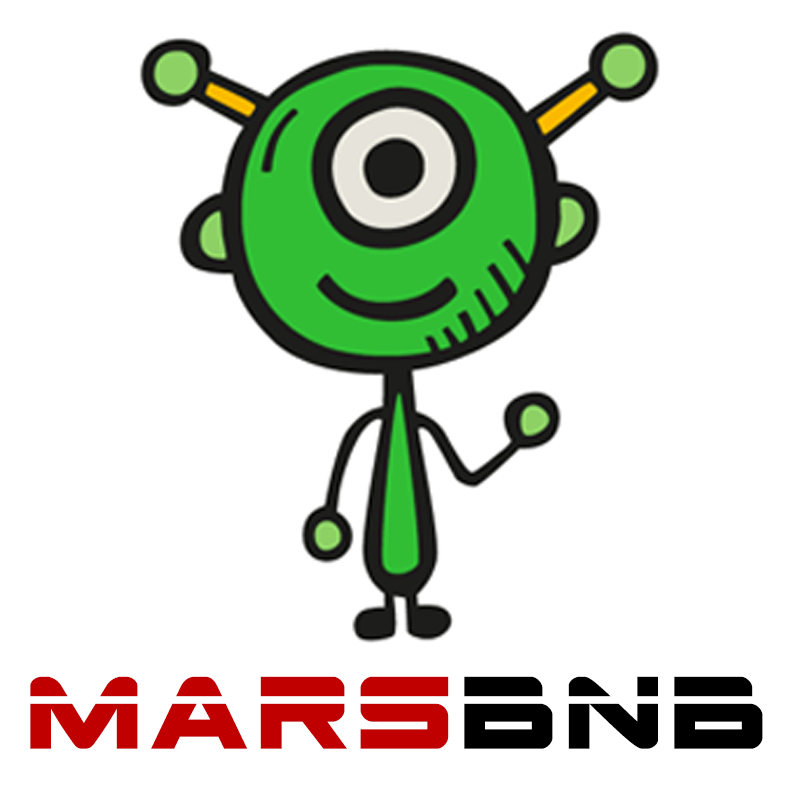
<style>
.page{position:relative;width:800px;height:800px;background:#ffffff}
.page>*{position:absolute;margin:0}
.t1{font:143.1px "SpaceRangerLaser";letter-spacing:0.05em;color:#c00000}
.t2{font:143.1px "SpaceRangerLaser";letter-spacing:0.05em;color:#000000}
</style>
<div class="page">
<p class="t1" style="left:30px;top:676px;width:733px;height:73px">Mars<span class="t2">BNB</span></p>
</div>
